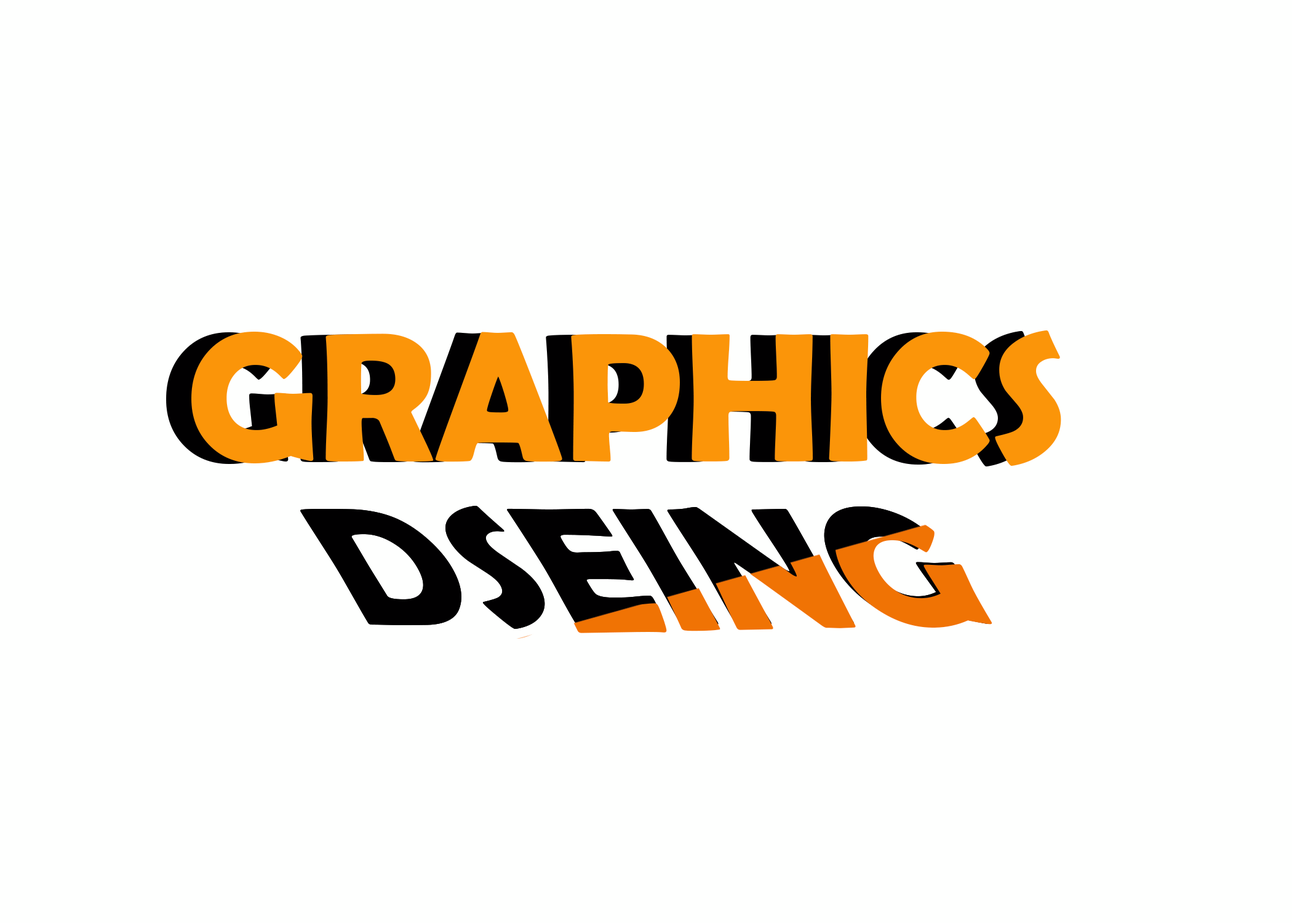
<style>
.page{position:relative;width:1292px;height:923px;background:#fefffe}
.page>*{position:absolute;margin:0}
.t1{font:184.6px "BerlinSansFBDemi-Bold"}
.t2{font:184.6px "BerlinSansFBDemi-Bold";color:#fb9509}
.t3{font:197.3px "BerlinSansFBDemi-Bold";color:#000000;scale:0.94 1}
.t4{font:184.1px "BerlinSansFBDemi-Bold"}
</style>
<div class="page">
<p class="t1" style="left:166px;top:331px;width:870px;height:135px">GRAPHICSDDD  DD<br> D</p>
<p class="t2" style="left:191px;top:330px;width:870px;height:136px">GRAPHICSDDD  DD<br> D</p>
<p class="t3" style="left:300px;top:506px;width:691px;height:123px">DSEING</p>
<p class="t3" style="left:300px;top:506px;width:691px;height:123px">DSEING</p>
<p class="t4" style="left:316px;top:510px;width:676px;height:129px;rotate:-1deg">DSEING</p>
</div>
